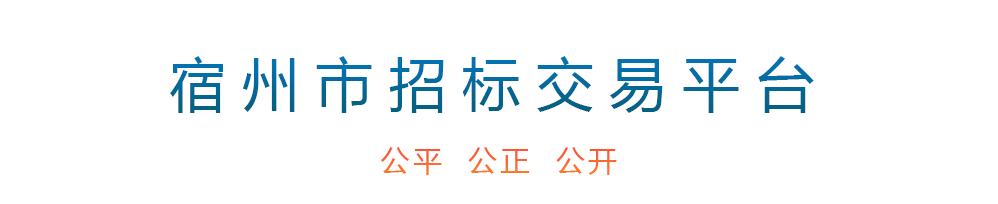
<style>
.page{position:relative;width:998px;height:204px;background:#ffffff}
.page>*{position:absolute;margin:0}
.t1{font:58.2px "MicrosoftYaHei";letter-spacing:0.26em;color:#036a9c;text-transform:uppercase}
.t2{font:29.3px "MicrosoftYaHei";letter-spacing:0.1em;color:#fd6531;text-transform:uppercase}
</style>
<div class="page">
<p class="t1" style="left:170px;top:56px;width:644px;height:57px">宿州市招标交易平台</p>
<p class="t2" style="left:380px;top:147px;width:237px;height:28px">公平  公正  公开</p>
</div>
